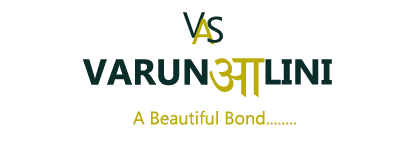
<style>
.page{position:relative;width:410px;height:160px;background:#ffffff}
.page>*{position:absolute;margin:0}
.t1{font:36px "MicrosoftTaiLe";color:#0b2d29}
.t2{font:36px "MicrosoftTaiLe";color:#bbac07}
.t3{font:36px "MicrosoftTaiLe-Bold";color:#0b2d29}
.t4{font:72px "KrutiDev020Bold";color:#bbac07}
.t5{font:18px "MicrosoftTaiLe";color:#bbac07}
</style>
<div class="page">
<p class="t1" style="left:183px;top:12px;width:22px;height:26px">V</p>
<p class="t1" style="left:207px;top:16px;width:16px;height:27px">S</p>
<p class="t2" style="left:192px;top:18px;width:23px;height:27px">A</p>
<p class="t3" style="left:83px;top:59px;width:125px;height:27px">VARUN</p>
<p class="t4" style="left:209px;top:58px;width:56px;height:40px">vk</p>
<p class="t3" style="left:265px;top:59px;width:67px;height:26px">LINI</p>
<p class="t5" style="left:133px;top:110px;width:164px;height:15px">A Beautiful Bond........</p>
</div>
